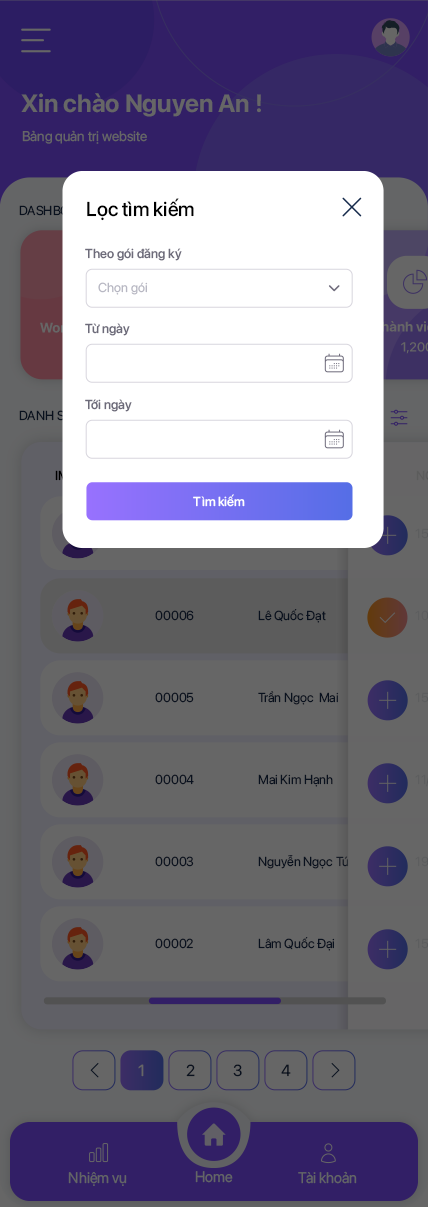
<style>
.page{position:relative;width:428px;height:1207px;background:#666666}
.page>*{position:absolute;margin:0}
.t1{font:25px "SFProDisplay-Bold";color:#666666}
.t2{font:14px "SFProDisplay-Regular";color:#666666}
.t3{font:20px "SFProDisplay-Medium";color:#000000}
.t4{font:13px "SFProDisplay-Medium";color:#6e6b7b}
.t5{font:13px "SFProDisplay-Regular";color:#b9b9c3}
.t6{font:13px "SFProDisplay-Medium";color:#ffffff}
.t7{font:13px "SFProDisplay-Regular";color:#09111e}
.t8{font:15.9px "SFProDisplay-Regular";color:#666666}
.t9{font:15.9px "SFProDisplay-Regular";color:#09111e}
.t10{font:15.3px "SFProDisplay-Regular";color:#646566;scale:0.96 1}
</style>
<div class="page">
<p class="t1" style="left:21px;top:93px;width:240px;height:24px">Xin chào Nguyen An !</p>
<p class="t2" style="left:22px;top:130px;width:125px;height:14px">Bảng quản trị website</p>
<p class="t3" style="left:87px;top:198px;width:107px;height:23px">Lọc tìm kiếm</p>
<p class="t4" style="left:85px;top:248px;width:97px;height:13px">Theo gói đăng ký</p>
<p class="t5" style="left:98px;top:282px;width:50px;height:13px">Chọn gói</p>
<p class="t4" style="left:85px;top:323px;width:45px;height:13px">Từ ngày</p>
<p class="t4" style="left:85px;top:399px;width:47px;height:13px">Tới ngày</p>
<p class="t6" style="left:193px;top:494px;width:52px;height:13px">Tìm kiếm</p>
<p class="t7" style="left:155px;top:610px;width:39px;height:11px">00006</p>
<p class="t7" style="left:258px;top:609px;width:68px;height:14px">Lê Quốc Đạt</p>
<p class="t7" style="left:155px;top:692px;width:39px;height:11px">00005</p>
<p class="t7" style="left:258px;top:691px;width:81px;height:14px">Trần Ngọc  Mai</p>
<p class="t7" style="left:155px;top:774px;width:39px;height:11px">00004</p>
<p class="t7" style="left:258px;top:774px;width:75px;height:13px">Mai Kim Hạnh</p>
<p class="t7" style="left:155px;top:856px;width:39px;height:11px">00003</p>
<p class="t7" style="left:258px;top:855px;width:91px;height:14px">Nguyễn Ngọc Tú</p>
<p class="t7" style="left:155px;top:938px;width:38px;height:11px">00002</p>
<p class="t7" style="left:258px;top:937px;width:77px;height:14px">Lâm Quốc Đại</p>
<p class="t8" style="left:138px;top:1064px;width:6px;height:13px">1</p>
<p class="t9" style="left:186px;top:1064px;width:9px;height:13px">2</p>
<p class="t9" style="left:233px;top:1064px;width:9px;height:13px">3</p>
<p class="t9" style="left:281px;top:1064px;width:10px;height:13px">4</p>
<p class="t10" style="left:68px;top:1172px;width:59px;height:14px">Nhiệm vụ</p>
<p class="t10" style="left:195px;top:1171px;width:38px;height:12px">Home</p>
<p class="t10" style="left:298px;top:1171px;width:59px;height:13px">Tài khoản</p>
</div>
